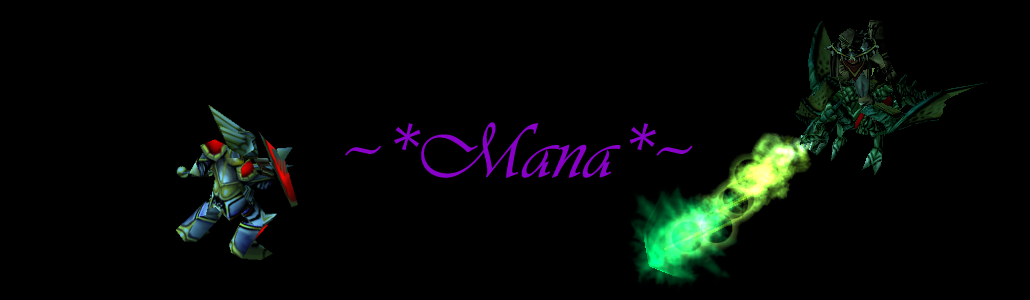
<style>
.page{position:relative;width:1030px;height:300px;background:#000000}
.page>*{position:absolute;margin:0}
.t1{font:80px "VivanteDTCITALIC";color:#8900c9}
</style>
<div class="page">
<p class="t1" style="left:345px;top:122px;width:348px;height:56px">~*Mana*~</p>
</div>
